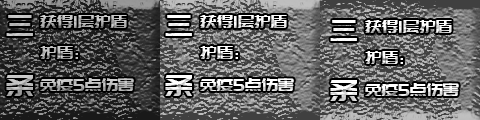
<style>
.page{position:relative;width:480px;height:120px}
.page>*{position:absolute;margin:0}
.t1{font:30px/60px "PangMenZhengDao";letter-spacing:-0.01em;color:#bebebe}
.t2{font:18px "PangMenZhengDao";letter-spacing:-0.01em;color:#c0c0c0}
.t3{font:30px/60px "PangMenZhengDao";letter-spacing:-0.01em;color:#ffffff}
.t4{font:18px "PangMenZhengDao";letter-spacing:-0.01em;color:#ffffff}
</style>
<div class="page">
<p class="t1" style="left:6px;top:15px;width:27px;height:81px">三<br>条</p>
<p class="t2" style="left:40px;top:15px;width:94px;height:76px">获得1层护盾<br>护盾：<br>免疫5点伤害</p>
<p class="t3" style="left:165px;top:15px;width:27px;height:81px">三<br>条</p>
<p class="t4" style="left:200px;top:15px;width:94px;height:76px">获得1层护盾<br>护盾：<br>免疫5点伤害</p>
<p class="t3" style="left:330px;top:20px;width:27px;height:81px">三<br>条</p>
<p class="t4" style="left:365px;top:20px;width:94px;height:76px">获得1层护盾<br>护盾：<br>免疫5点伤害</p>
</div>
